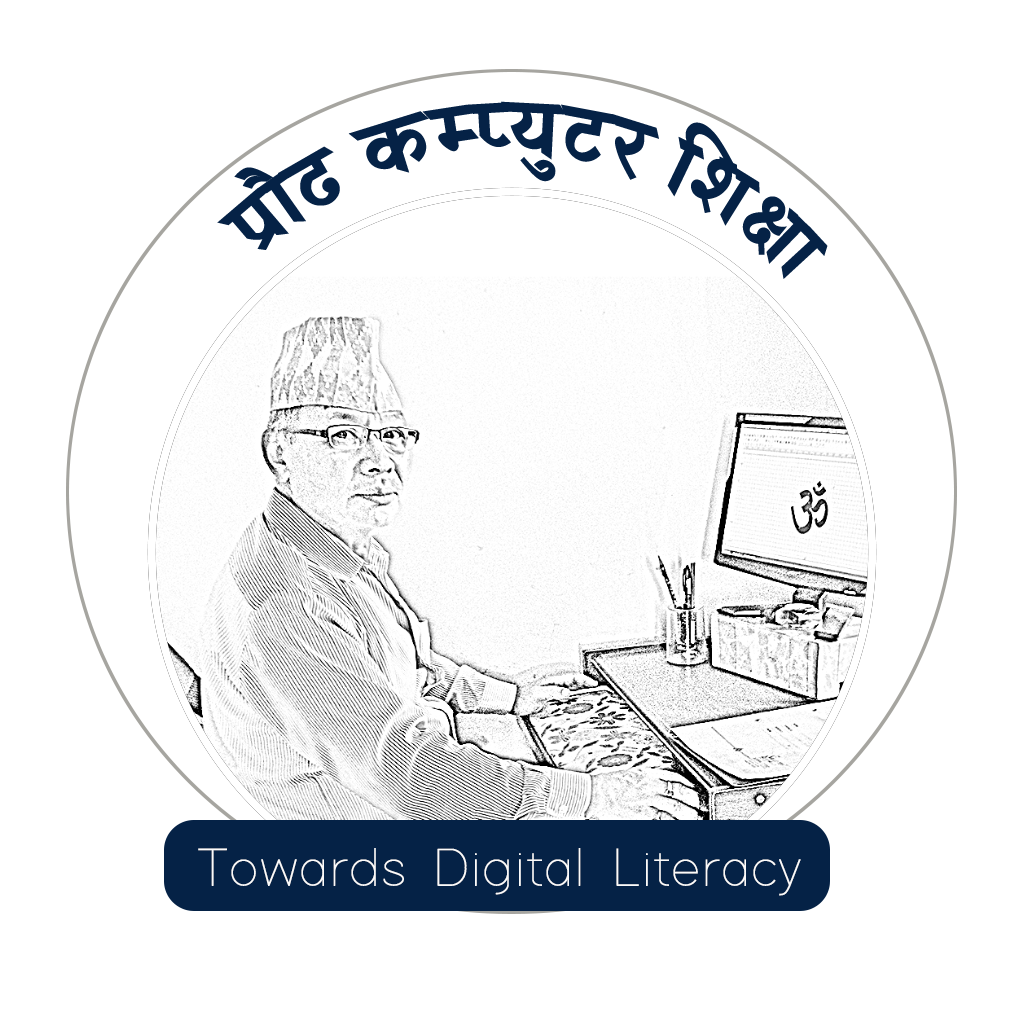
<style>
.page{position:relative;width:1024px;height:1024px;background:#ffffff}
.page>*{position:absolute;margin:0}
.t1{font:79.2px "JDRAMRIT2";color:#052246}
.t2{font:112.5px "JDRAMRIT2";color:#052246}
.t3{font:54.2px "Adam";color:#fbfbfb;font-weight:bold}
</style>
<div class="page">
<p class="t1" style="left:217px;top:101px;width:611px;height:178px"><span class="t2">             k|f}9 sDKo'6/ lzIff<br></span>Towards Digital Literacy</p>
<p class="t3" style="left:198px;top:848px;width:603px;height:48px">Towards Digital Literacy</p>
</div>
